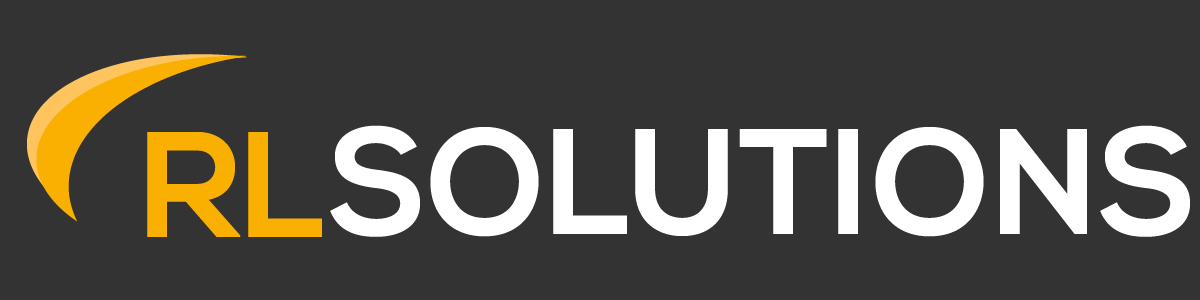
<style>
.page{position:relative;width:1200px;height:300px;background:#333333}
.page>*{position:absolute;margin:0}
.t1{font:150px "NexaBold";color:#fefefe}
.t2{font:150px "NexaBold";color:#f9b000}
</style>
<div class="page">
<p class="t1" style="left:330px;top:125px;width:860px;height:112px">SOLUTIONS</p>
<p class="t2" style="left:147px;top:131px;width:175px;height:106px">RL</p>
</div>
